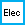
<style>
.page{position:relative;width:25px;height:25px;background:#ffffff}
.page>*{position:absolute;margin:0}
.t1{font:9px "MicrosoftSansSerif";color:#000000}
</style>
<div class="page">
<p class="t1" style="left:4px;top:9px;width:16px;height:7px">Elec</p>
</div>
